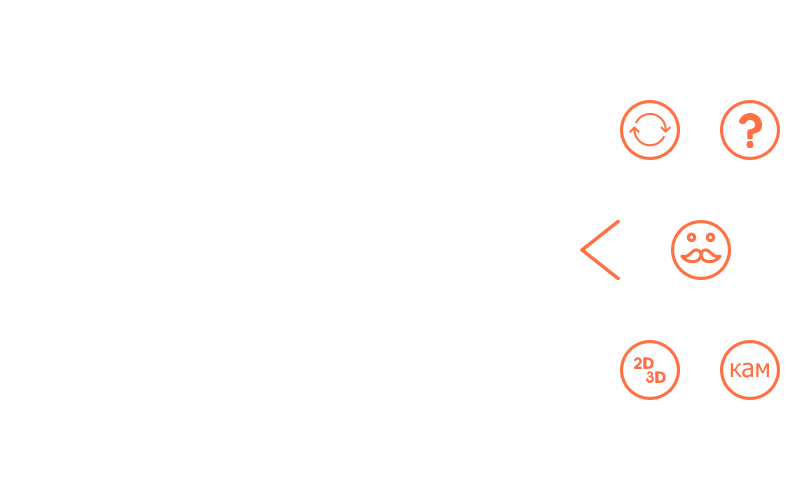
<style>
.page{position:relative;width:800px;height:480px;background:#ffffff}
.page>*{position:absolute;margin:0}
.t1{font:41.7px "shirota";color:#ff7043}
.t2{font:16.7px "shirota";color:#ff7043}
.t3{font:25px "Tahoma";color:#ff7043}
</style>
<div class="page">
<p class="t1" style="left:739px;top:113px;width:23px;height:35px">?</p>
<p class="t2" style="left:634px;top:357px;width:20px;height:12px">2D</p>
<p class="t3" style="left:730px;top:362px;width:39px;height:16px">кам</p>
<p class="t2" style="left:646px;top:371px;width:20px;height:12px">3D</p>
</div>
